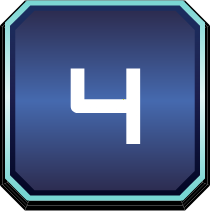
<style>
.page{position:relative;width:210px;height:211px}
.page>*{position:absolute;margin:0}
.t1{font:108px "Audiowide-Regular";color:#ffffff}
</style>
<div class="page">
<p class="t1" style="left:70px;top:68px;width:71px;height:76px">4</p>
</div>
